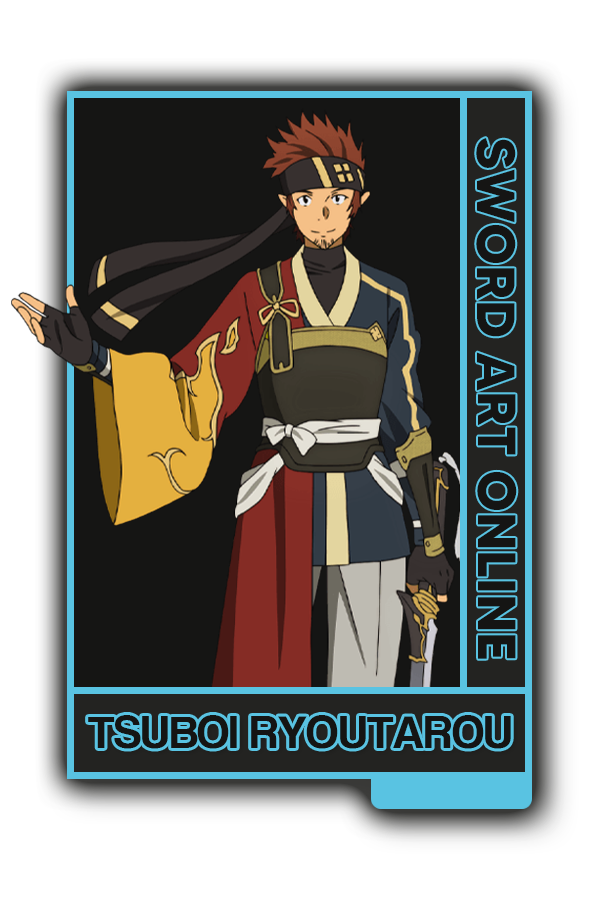
<style>
.page{position:relative;width:600px;height:900px;background:#151514}
.page>*{position:absolute;margin:0}
.t1{font:53.7px "MADETOMMY-Bold";color:#151514}
.t2{font:48px "CoolveticaRg-Regular";color:#151514}
</style>
<div class="page">
<p class="t1" style="left:476px;top:138px;width:41px;height:521px;rotate:90deg">SWORD ART ONLINE</p>
<p class="t2" style="left:88px;top:715px;width:423px;height:34px">TSUBOI RYOUTAROU</p>
</div>
